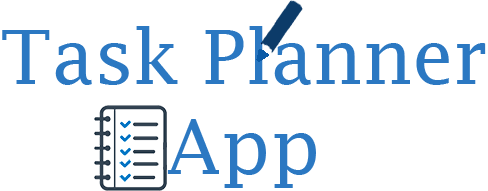
<style>
.page{position:relative;width:488px;height:191px;background:#ffffff}
.page>*{position:absolute;margin:0}
.t1{font:75px "LucidaFax";color:#2b78c2}
</style>
<div class="page">
<p class="t1" style="left:2px;top:26px;width:484px;height:162px;text-align:center">Task Planner<br>App</p>
</div>
